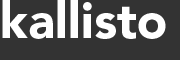
<style>
.page{position:relative;width:180px;height:60px;background:#333333}
.page>*{position:absolute;margin:0}
.t1{font:50px "Avenir-Black";color:#ffffff}
</style>
<div class="page">
<p class="t1" style="left:2px;top:0px;width:164px;height:39px">kallisto</p>
</div>
